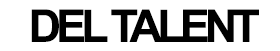
<style>
.page{position:relative;width:280px;height:51px;background:#ffffff}
.page>*{position:absolute;margin:0}
.t1{font:45px "Arial-BoldMT";letter-spacing:-0.11em;color:#000000}
</style>
<div class="page">
<p class="t1" style="left:31px;top:9px;width:228px;height:33px">DEL TALENT</p>
</div>
